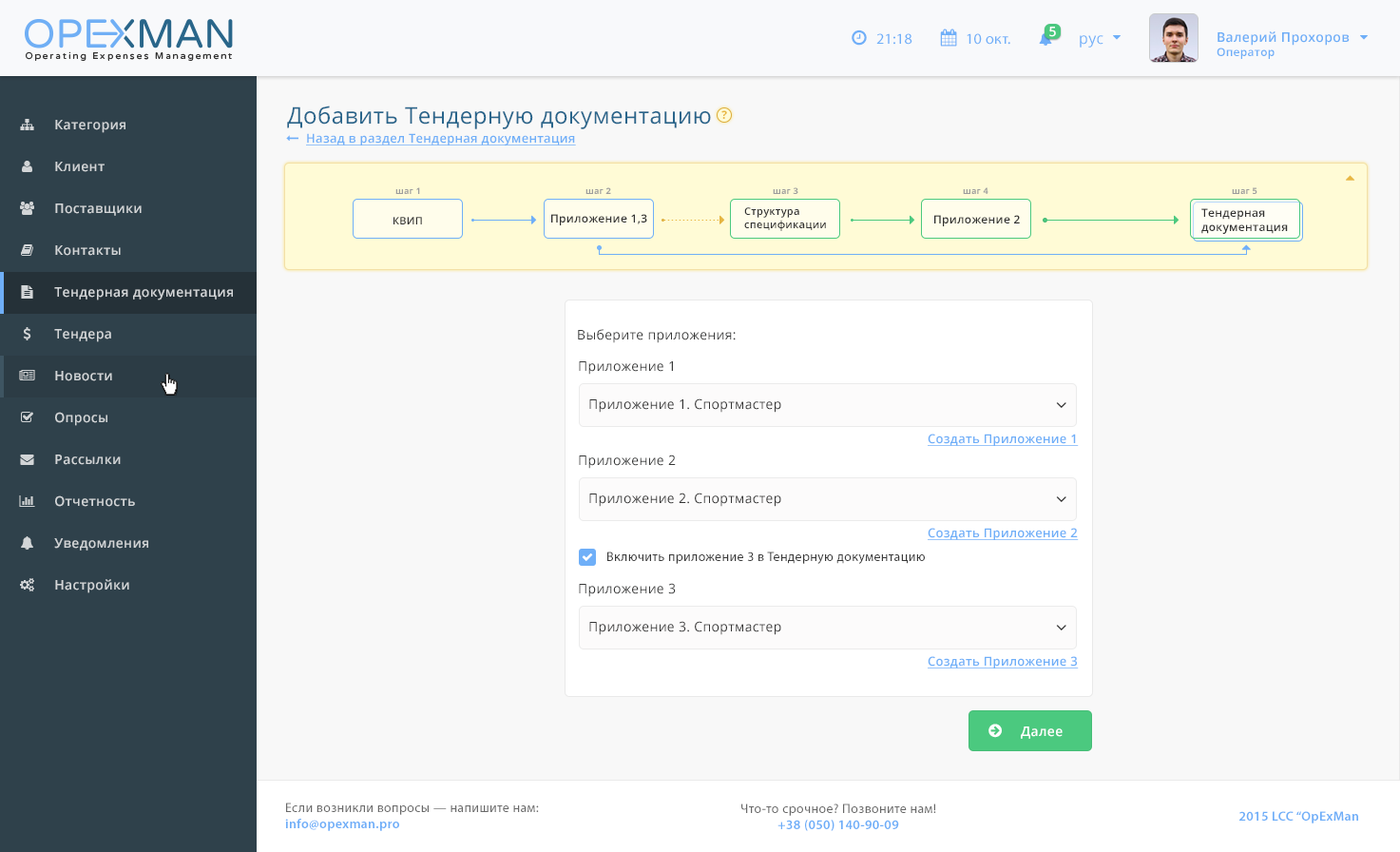
<style>
.page{position:relative;width:1400px;height:852px;background:#f8f8f8}
.page>*{position:absolute;margin:0}
.t1{font:13.3px "OpenSans-Semibold";letter-spacing:0.025em;color:#ffffff}
.t2{font:15.2px "MyriadPro-Regular";letter-spacing:0.025em;color:#6faff8}
.t3{font:15.2px "OpenSans";letter-spacing:0.025em;color:#6eaff8}
.t4{font:13.3px "OpenSans-Semibold";letter-spacing:0.025em;color:#6eaef7}
.t5{font:11.4px "OpenSans-Semibold";letter-spacing:0.025em;color:#6eaef7}
.t6{font:22.7px "OpenSans";letter-spacing:0.025em;color:#29658b}
.t7{font:11.4px "OpenSans-Bold";letter-spacing:0.025em;color:#e8b742}
.t8{font:13.3px "OpenSans-Semibold";letter-spacing:0.025em;color:#d2d5d7}
.t9{font:12.3px "OpenSans-Semibold";letter-spacing:0.025em;color:#6faff8;text-decoration:underline}
.t10{font:8.5px "OpenSans-Bold";letter-spacing:0.025em;color:#9d9d9d}
.t11{font:10.4px "OpenSans-Semibold";letter-spacing:0.025em;color:#323232}
.t12{font:11.4px "OpenSans-Semibold";letter-spacing:0.025em;color:#323232}
.t13{font:13.3px "OpenSans";letter-spacing:0.025em;color:#373838}
.t14{font:13.3px "OpenSans";letter-spacing:0.025em;color:#333333}
.t15{font:13.3px "MyriadPro-Regular";letter-spacing:0.025em;color:#3a3a3a}
.t16{font:13.3px "MyriadPro-Regular";letter-spacing:0.025em;color:#696969}
.t17{font:13.3px "MyriadPro-Semibold";letter-spacing:0.025em;color:#6eaef8}
</style>
<div class="page">
<p class="t1" style="left:1049px;top:27px;width:7px;height:10px">5</p>
<p class="t2" style="left:876px;top:33px;width:36px;height:12px">21:18</p>
<p class="t2" style="left:967px;top:33px;width:43px;height:12px">10 окт.</p>
<p class="t3" style="left:1080px;top:35px;width:24px;height:13px">рус</p>
<p class="t4" style="left:1217px;top:31px;width:133px;height:28px">Валерий Прохоров<br><span class="t5">Оператор</span></p>
<p class="t6" style="left:287px;top:106px;width:424px;height:23px">Добавить Тендерную документацию</p>
<p class="t7" style="left:721px;top:110px;width:6px;height:9px">?</p>
<p class="t8" style="left:55px;top:120px;width:70px;height:13px">Категория</p>
<p class="t9" style="left:306px;top:133px;width:270px;height:12px">Назад в раздел Тендерная документация</p>
<p class="t8" style="left:55px;top:162px;width:50px;height:10px">Клиент</p>
<p class="t10" style="left:395px;top:187px;width:25px;height:7px">шаг 1</p>
<p class="t10" style="left:586px;top:187px;width:25px;height:7px">шаг 2</p>
<p class="t10" style="left:773px;top:187px;width:25px;height:7px">шаг 3</p>
<p class="t10" style="left:963px;top:187px;width:26px;height:7px">шаг 4</p>
<p class="t10" style="left:1232px;top:187px;width:26px;height:7px">шаг 5</p>
<p class="t8" style="left:55px;top:203px;width:87px;height:13px">Поставщики</p>
<p class="t11" style="left:744px;top:207px;width:82px;height:24px">Структура<br>спецификации</p>
<p class="t12" style="left:1201px;top:208px;width:87px;height:26px">Тендерная <br>документация</p>
<p class="t11" style="left:394px;top:217px;width:28px;height:7px">КВИП</p>
<p class="t12" style="left:551px;top:214px;width:96px;height:11px">Приложение 1,3</p>
<p class="t12" style="left:934px;top:215px;width:86px;height:11px">Приложение 2</p>
<p class="t8" style="left:55px;top:245px;width:66px;height:11px">Контакты</p>
<p class="t8" style="left:54px;top:287px;width:179px;height:13px">Тендерная документация</p>
<p class="t8" style="left:54px;top:329px;width:57px;height:13px">Тендера</p>
<p class="t13" style="left:578px;top:329px;width:158px;height:14px">Выберите приложения:</p>
<p class="t13" style="left:579px;top:361px;width:94px;height:14px">Приложение 1</p>
<p class="t8" style="left:55px;top:371px;width:57px;height:10px">Новости</p>
<p class="t14" style="left:589px;top:398px;width:192px;height:15px">Приложение 1. Спортмастер</p>
<p class="t8" style="left:55px;top:412px;width:52px;height:14px">Опросы</p>
<p class="t9" style="left:928px;top:433px;width:151px;height:13px">Создать Приложение 1</p>
<p class="t8" style="left:55px;top:454px;width:66px;height:11px">Рассылки</p>
<p class="t13" style="left:579px;top:454px;width:97px;height:15px">Приложение 2</p>
<p class="t8" style="left:55px;top:495px;width:80px;height:12px">Отчетность</p>
<p class="t14" style="left:589px;top:492px;width:192px;height:15px">Приложение 2. Спортмастер</p>
<p class="t9" style="left:928px;top:528px;width:151px;height:12px">Создать Приложение 2</p>
<p class="t8" style="left:54px;top:538px;width:94px;height:12px">Уведомления</p>
<p class="t15" style="left:607px;top:551px;width:318px;height:13px">Включить приложение 3 в Тендерную документацию</p>
<p class="t8" style="left:55px;top:579px;width:74px;height:14px">Настройки</p>
<p class="t13" style="left:579px;top:583px;width:97px;height:14px">Приложение 3</p>
<p class="t14" style="left:589px;top:621px;width:192px;height:14px">Приложение 3. Спортмастер</p>
<p class="t9" style="left:928px;top:656px;width:151px;height:12px">Создать Приложение 3</p>
<p class="t1" style="left:1021px;top:726px;width:42px;height:13px">Далее</p>
<p class="t16" style="left:285px;top:802px;width:254px;height:29px">Если возникли вопросы — напишите нам:<br><span class="t17">info@opexman.pro</span></p>
<p class="t16" style="left:741px;top:803px;width:195px;height:28px;text-align:center">Что-то срочное? Позвоните нам!<br><span class="t17">+38 (050) 140-90-09</span></p>
<p class="t17" style="left:1239px;top:811px;width:119px;height:12px">2015 LCC “OpExMan</p>
</div>
